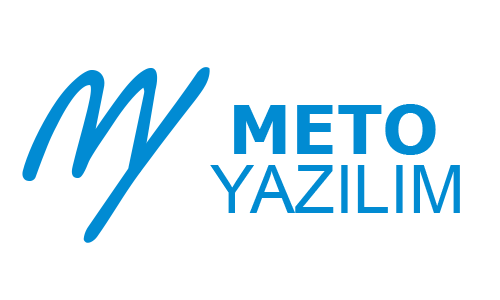
<style>
.page{position:relative;width:500px;height:300px;background:#ffffff}
.page>*{position:absolute;margin:0}
.t1{font:66.7px "Verdana-Bold";color:#018bd2}
.t2{font:66.7px "ArialMT";color:#018bd2}
</style>
<div class="page">
<p class="t1" style="left:234px;top:104px;width:202px;height:51px">METO</p>
<p class="t2" style="left:210px;top:165px;width:250px;height:48px">YAZILIM</p>
</div>
